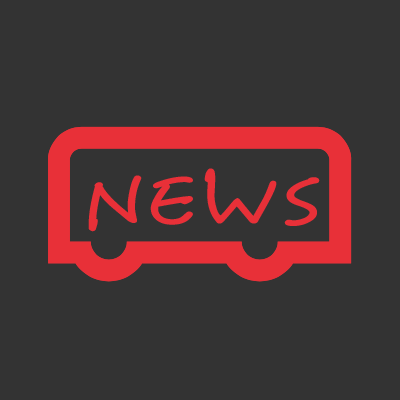
<style>
.page{position:relative;width:400px;height:400px;background:#333333}
.page>*{position:absolute;margin:0}
.t1{font:66.7px "HanziPenSC-W5";letter-spacing:0.02em;color:#e83038;scale:1.4 1}
</style>
<div class="page">
<p class="t1" style="left:88px;top:168px;width:232px;height:64px">NEWS</p>
</div>
